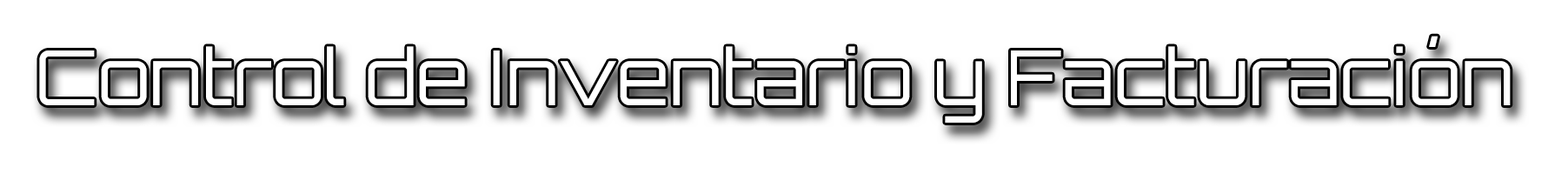
<style>
.page{position:relative;width:1568px;height:174px;background:#ffffff}
.page>*{position:absolute;margin:0}
.t1{font:76.1px "Orbitron-Light";color:#ffffff}
</style>
<div class="page">
<p class="t1" style="left:39px;top:36px;width:1472px;height:87px">Control de Inventario y Facturación</p>
</div>
